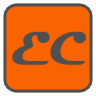
<style>
.page{position:relative;width:96px;height:96px;background:#fa6400}
.page>*{position:absolute;margin:0}
.t1{font:48px "Magneto-Bold";color:#505050}
</style>
<div class="page">
<p class="t1" style="left:12px;top:31px;width:74px;height:34px">EC</p>
</div>
